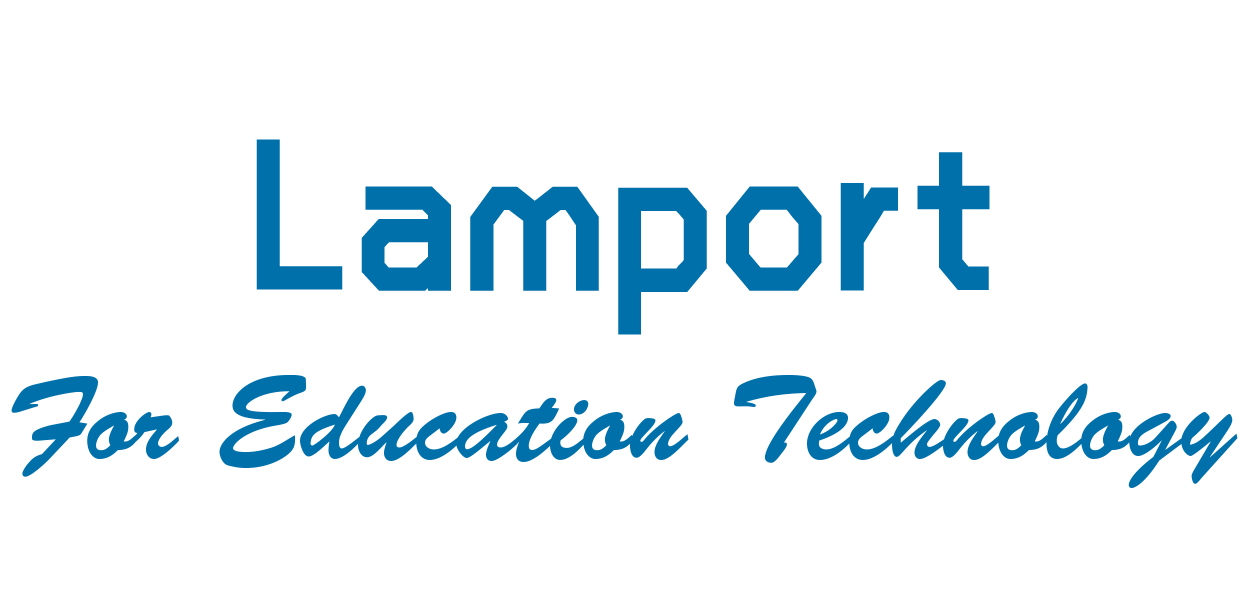
<style>
.page{position:relative;width:1247px;height:600px;background:#ffffff}
.page>*{position:absolute;margin:0}
.t1{font:220px "STHeitiSC-Light";color:#0070aa}
.t2{font:120px "BrushScriptStd";color:#0070aa}
</style>
<div class="page">
<p class="t1" style="left:256px;top:139px;width:734px;height:196px">Lamport</p>
<p class="t2" style="left:11px;top:374px;width:1227px;height:114px">For Education Technology</p>
</div>
